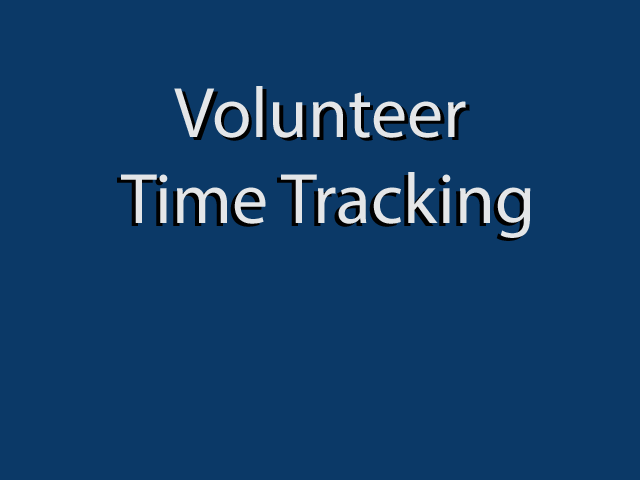
<style>
.page{position:relative;width:640px;height:480px;background:#0b3967}
.page>*{position:absolute;margin:0}
.t1{font:72px "MyriadPro-Regular";color:#e4e6e8}
</style>
<div class="page">
<p class="t1" style="left:121px;top:86px;width:410px;height:152px;text-align:center">Volunteer <br>Time Tracking</p>
</div>
